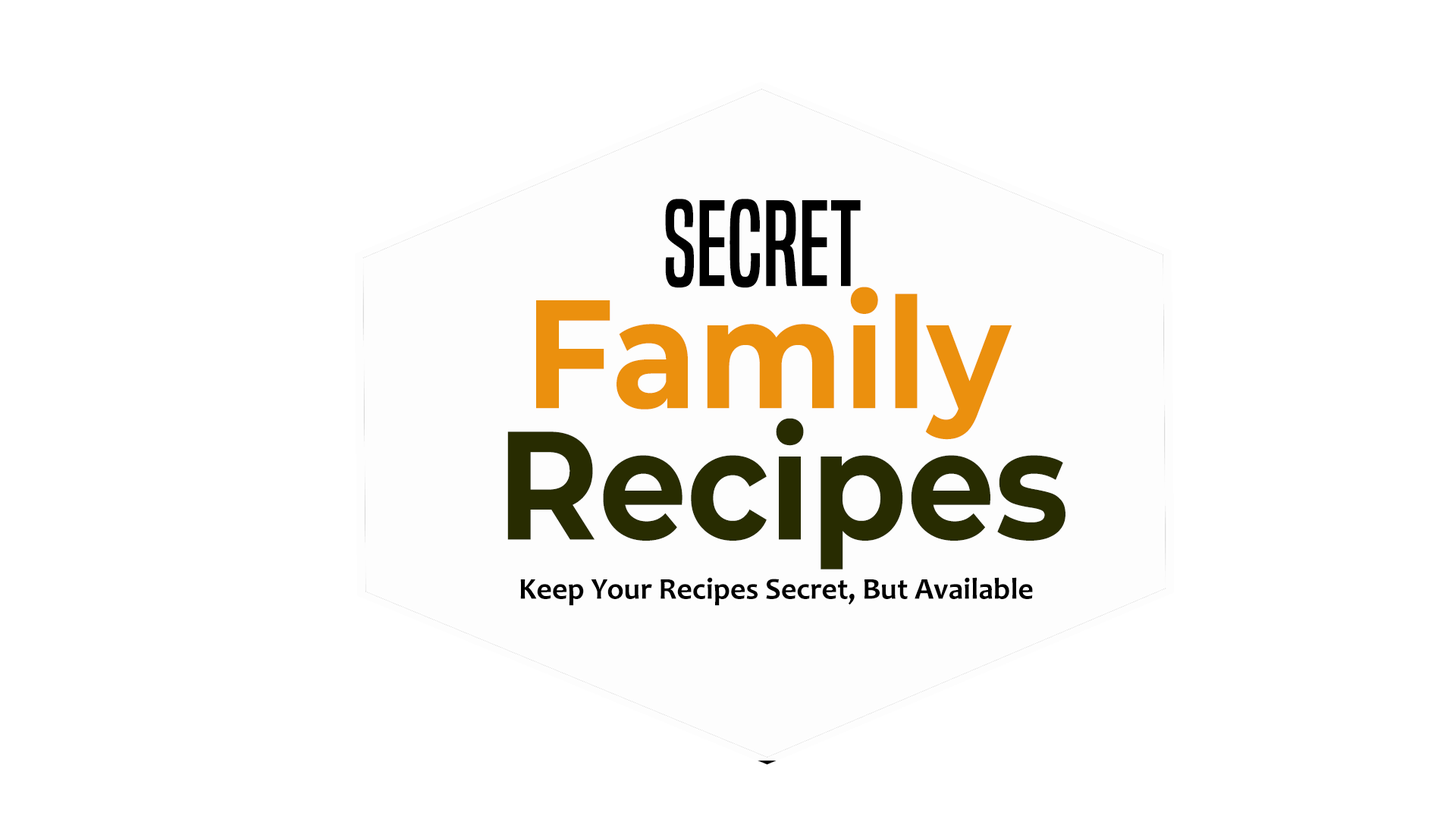
<style>
.page{position:relative;width:1456px;height:819px;background:#ffffff}
.page>*{position:absolute;margin:0}
.t1{font:113.3px "BuiltTitlingRg-Regular";color:#000000;scale:0.93 1}
.t2{font:153.7px "Montserrat-Bold";color:#eb900e;scale:0.91 1}
.t3{font:153.7px "Montserrat-Bold";color:#282c01;scale:0.91 1}
.t4{font:30.3px "Candara-Bold";color:#000000}
</style>
<div class="page">
<p class="t1" style="left:665px;top:199px;width:196px;height:89px">Secret</p>
<p class="t2" style="left:536px;top:287px;width:476px;height:153px">Family</p>
<p class="t3" style="left:507px;top:418px;width:558px;height:152px">Recipes</p>
<p class="t4" style="left:520px;top:577px;width:513px;height:29px">Keep Your Recipes Secret, But Available</p>
</div>
